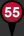
<style>
.page{position:relative;width:24px;height:36px;background:#333333}
.page>*{position:absolute;margin:0}
.t1{font:14.3px "Arial-BoldMT";color:#ffffff}
</style>
<div class="page">
<p class="t1" style="left:4px;top:7px;width:16px;height:11px">55</p>
</div>
